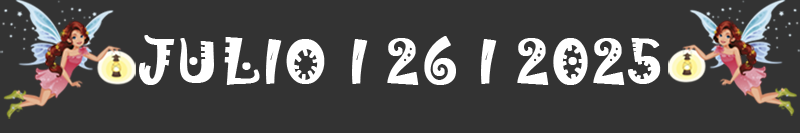
<style>
.page{position:relative;width:800px;height:133px;background:#333333}
.page>*{position:absolute;margin:0}
.t1{font:54px "Jokerman-Regular";letter-spacing:0.05em;color:#ffffff;text-transform:uppercase;font-weight:bold}
</style>
<div class="page">
<p class="t1" style="left:139px;top:35px;width:522px;height:50px">Julio I 26 I 2025</p>
</div>
